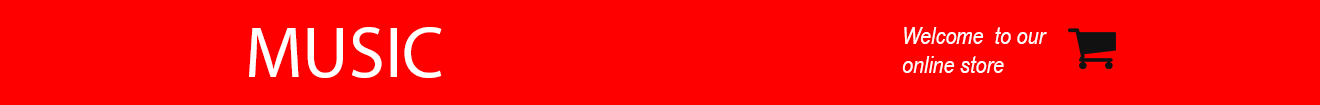
<style>
.page{position:relative;width:1320px;height:105px;background:#ff0000}
.page>*{position:absolute;margin:0}
.t1{font:72px "MyriadHebrew-Regular";color:#ffffff}
.t2{font:72px "MyriadHebrew-Regular";color:#ff0000}
.t3{font:24px "ArialNarrow-Italic";color:#ffffff}
</style>
<div class="page">
<p class="t1" style="left:249px;top:27px;width:252px;height:51px">MUSIC<span class="t2">IC</span></p>
<p class="t3" style="left:902px;top:27px;width:145px;height:46px;text-align:right">Welcome  to our online store</p>
</div>
